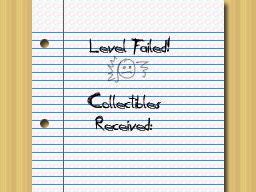
<style>
.page{position:relative;width:256px;height:192px}
.page>*{position:absolute;margin:0}
.t1{font:18px "Daubed";color:#000000}
</style>
<div class="page">
<p class="t1" style="left:89px;top:36px;width:81px;height:19px">Level Failed!</p>
<p class="t1" style="left:87px;top:92px;width:74px;height:40px;text-align:center">Collectibles<br>Received:</p>
</div>
